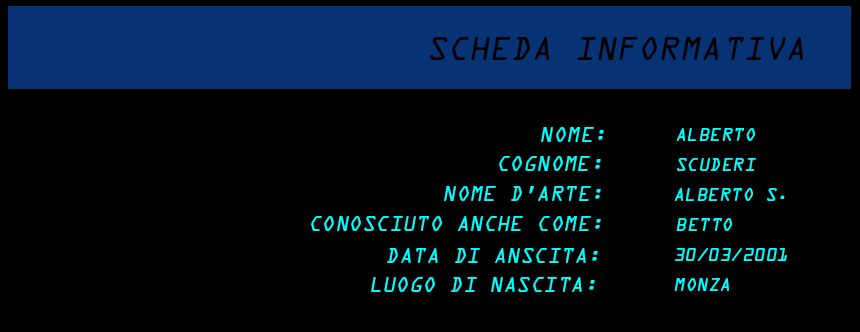
<style>
.page{position:relative;width:860px;height:332px;background:#000000}
.page>*{position:absolute;margin:0}
.t1{font:29.3px "OCRAStd";color:#000000;text-transform:uppercase;font-style:italic}
.t2{font:18.7px "OCRAStd";color:#00ffff;text-transform:uppercase;font-style:italic}
.t3{font:16px "OCRAStd";color:#00ffff;text-transform:uppercase;font-style:italic}
</style>
<div class="page">
<p class="t1" style="left:430px;top:37px;width:373px;height:23px">SCHEDA INFORMATIVA</p>
<p class="t2" style="left:541px;top:127px;width:63px;height:15px">NOME:</p>
<p class="t3" style="left:676px;top:128px;width:79px;height:13px">ALBERTO</p>
<p class="t2" style="left:499px;top:156px;width:102px;height:15px">COGNOME:</p>
<p class="t3" style="left:677px;top:158px;width:79px;height:13px">SCUDERI</p>
<p class="t2" style="left:444px;top:186px;width:157px;height:15px">NOME D’ARTE:</p>
<p class="t3" style="left:674px;top:188px;width:111px;height:13px">ALBERTO S.</p>
<p class="t2" style="left:311px;top:216px;width:290px;height:15px">CONOSCIUTO ANCHE COME:</p>
<p class="t3" style="left:676px;top:218px;width:56px;height:13px">BETTO</p>
<p class="t2" style="left:387px;top:248px;width:211px;height:15px">data di anscita:</p>
<p class="t3" style="left:674px;top:248px;width:113px;height:13px">30/03/2001</p>
<p class="t2" style="left:371px;top:277px;width:224px;height:15px">luogo di nascita:</p>
<p class="t3" style="left:674px;top:278px;width:55px;height:13px">MONZA</p>
</div>
